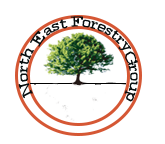
<style>
.page{position:relative;width:165px;height:144px;background:#ffffff}
.page>*{position:absolute;margin:0}
.t1{font:14px "Century";color:#080f10}
</style>
<div class="page">
<p class="t1" style="left:70px;top:16px;width:62px;height:34px;rotate:26deg">Forestry</p>
<p class="t1" style="left:30px;top:19px;width:38px;height:28px;rotate:-33deg">East</p>
<p class="t1" style="left:18px;top:48px;width:16px;height:51px;rotate:-88deg">North</p>
<p class="t1" style="left:124px;top:51px;width:14px;height:51px;rotate:88deg">Group</p>
</div>
